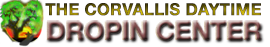
<style>
.page{position:relative;width:270px;height:47px;background:#ffffff}
.page>*{position:absolute;margin:0}
.t1{font:16.3px "HelveticaNeueLTPro-Bd";font-weight:bold}
.t2{font:25.9px "HelveticaNeueLTPro-Bd"}
</style>
<div class="page">
<p class="t1" style="left:45px;top:3px;width:216px;height:13px">THE CORVALLIS DAYTIME</p>
<p class="t1" style="left:45px;top:3px;width:216px;height:13px">THE CORVALLIS DAYTIME</p>
<p class="t2" style="left:46px;top:21px;width:214px;height:20px">DROPIN CENTER</p>
</div>
